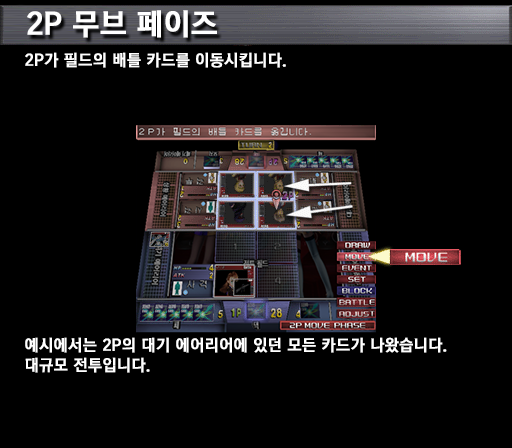
<style>
.page{position:relative;width:512px;height:448px;background:#000000}
.page>*{position:absolute;margin:0}
.t1{font:30px "KoreanGD15-R";color:#ffffff;font-weight:bold}
.t2{font:16px "KoreanGD15-R";color:#ffffff;font-weight:bold}
.t3{font:16px/20px "KoreanGD15-R";color:#ffffff;font-weight:bold}
</style>
<div class="page">
<p class="t1" style="left:27px;top:10px;width:190px;height:28px">2P 무브 페이즈</p>
<p class="t2" style="left:25px;top:52px;width:261px;height:16px">2P가 필드의 배틀 카드를 이동시킵니다.</p>
<p class="t3" style="left:25px;top:337px;width:422px;height:36px">예시에서는 2P의 대기 에어리어에 있던 모든 카드가 나왔습니다.<br>대규모 전투입니다.</p>
</div>
